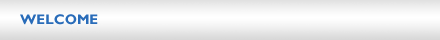
<style>
.page{position:relative;width:440px;height:40px}
.page>*{position:absolute;margin:0}
.t1{font:14px "GillSans-Bold";color:#296cb9;text-transform:uppercase}
</style>
<div class="page">
<p class="t1" style="left:20px;top:14px;width:78px;height:11px">welcome</p>
</div>
